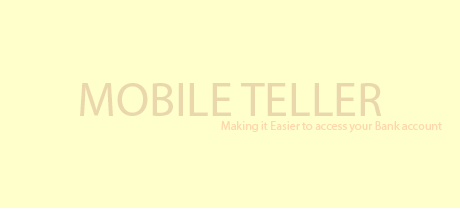
<style>
.page{position:relative;width:460px;height:209px;background:#ffffcc}
.page>*{position:absolute;margin:0}
.t1{font:12px "MyriadPro-Regular";color:#ead7ac}
.t2{font:48px "MyriadPro-Regular";color:#ead7ac}
</style>
<div class="page">
<p class="t1" style="left:80px;top:83px;width:362px;height:50px"><span class="t2">MOBILE TELLER<br>    </span>Making it Easier to access your Bank account</p>
</div>
